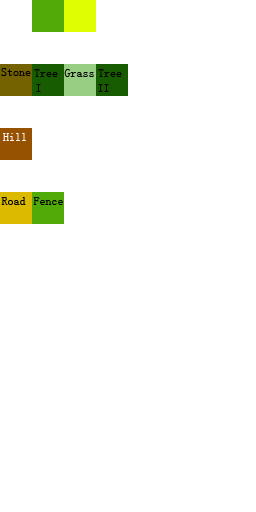
<style>
.page{position:relative;width:256px;height:512px;background:#ffffff}
.page>*{position:absolute;margin:0}
.t1{font:12px "SimSun";color:#000000}
.t2{font:12px "SimSun";color:#ffffff}
</style>
<div class="page">
<p class="t1" style="left:1px;top:68px;width:30px;height:8px">Stone</p>
<p class="t1" style="left:34px;top:69px;width:24px;height:8px">Tree</p>
<p class="t1" style="left:64px;top:69px;width:30px;height:8px">Grass</p>
<p class="t1" style="left:98px;top:69px;width:24px;height:8px">Tree</p>
<p class="t1" style="left:36px;top:84px;width:5px;height:8px">I</p>
<p class="t1" style="left:98px;top:84px;width:11px;height:8px">II</p>
<p class="t2" style="left:3px;top:133px;width:23px;height:8px">Hill</p>
<p class="t1" style="left:1px;top:197px;width:25px;height:8px">Road</p>
<p class="t1" style="left:33px;top:197px;width:30px;height:8px">Fence</p>
</div>
